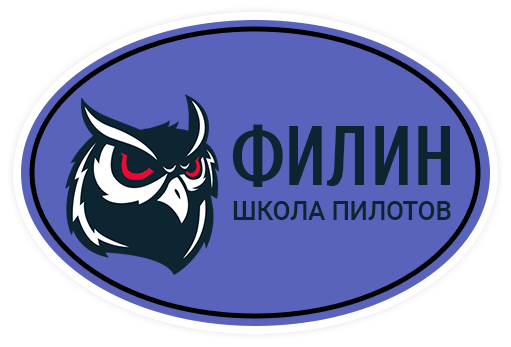
<style>
.page{position:relative;width:511px;height:347px;background:#5963bb}
.page>*{position:absolute;margin:0}
.t1{font:83.7px "Cuprum-Bold";color:#0d2531;scale:0.9 1}
.t2{font:25.5px "Roboto-Medium";color:#0d2531}
</style>
<div class="page">
<p class="t1" style="left:232px;top:124px;width:218px;height:63px">ФИЛИН</p>
<p class="t2" style="left:233px;top:201px;width:218px;height:19px">ШКОЛА ПИЛОТОВ</p>
</div>
